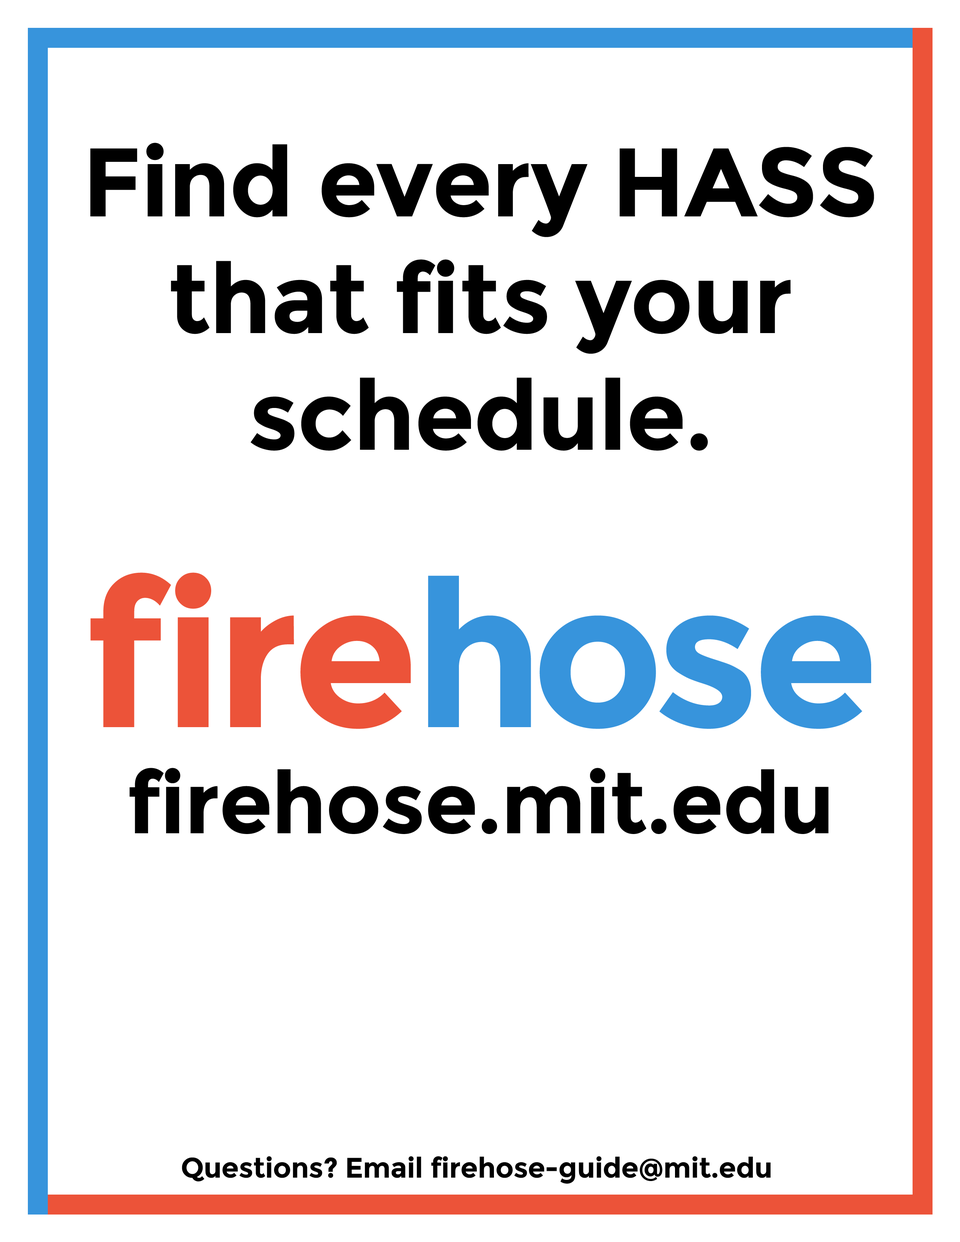
<style>
.page{position:relative;width:960px;height:1242px;background:#ffffff}
.page>*{position:absolute;margin:0}
.t1{font:97.2px "Montserrat-Bold";letter-spacing:-0.01em;color:#000000}
.t2{font:203.9px "Montserrat-Bold";letter-spacing:-0.01em;color:#ec5339}
.t3{font:203.9px "Montserrat-Bold";letter-spacing:-0.01em;color:#3794dc}
.t4{font:86.3px "Montserrat-Bold";letter-spacing:-0.01em;color:#000000}
.t5{font:28.2px "Montserrat-Bold";letter-spacing:-0.01em;color:#000000}
</style>
<div class="page">
<p class="t1" style="left:90px;top:143px;width:784px;height:308px;text-align:center">Find every HASS<br>that fits your<br>schedule.</p>
<p class="t2" style="left:90px;top:573px;width:781px;height:156px">fire<span class="t3">hose</span></p>
<p class="t4" style="left:129px;top:768px;width:700px;height:66px">firehose.mit.edu</p>
<p class="t5" style="left:182px;top:1156px;width:589px;height:28px">Questions? Email firehose-guide@mit.edu</p>
</div>
